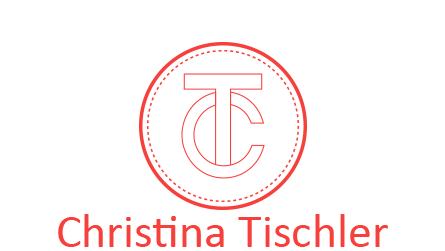
<style>
.page{position:relative;width:445px;height:251px;background:#ffffff}
.page>*{position:absolute;margin:0}
.t1{font:48px "Calibri";color:#f7403c}
</style>
<div class="page">
<p class="t1" style="left:58px;top:214px;width:330px;height:33px">Christina Tischler</p>
</div>
